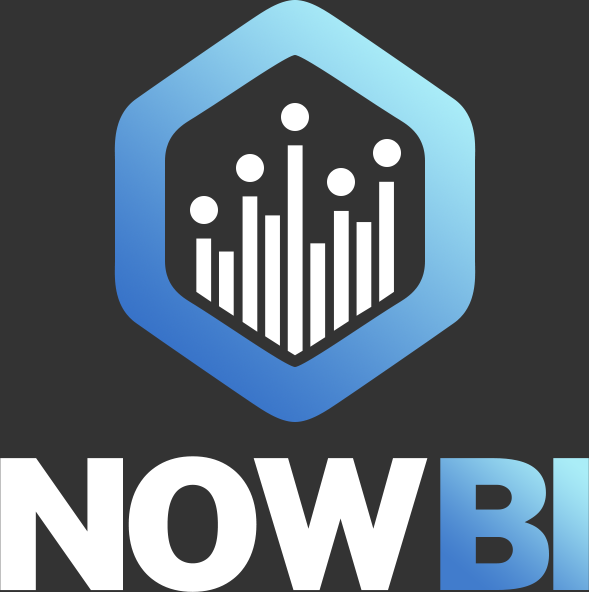
<style>
.page{position:relative;width:589px;height:592px;background:#333333}
.page>*{position:absolute;margin:0}
.t1{font:182.4px "PublicSansRoman-Black";letter-spacing:-0.075em;color:#ffffff}
.t2{font:182.4px "PublicSansRoman-Black";letter-spacing:-0.075em}
</style>
<div class="page">
<p class="t1" style="left:0px;top:456px;width:428px;height:136px">NOW</p>
<p class="t2" style="left:440px;top:458px;width:149px;height:132px">BI</p>
</div>
